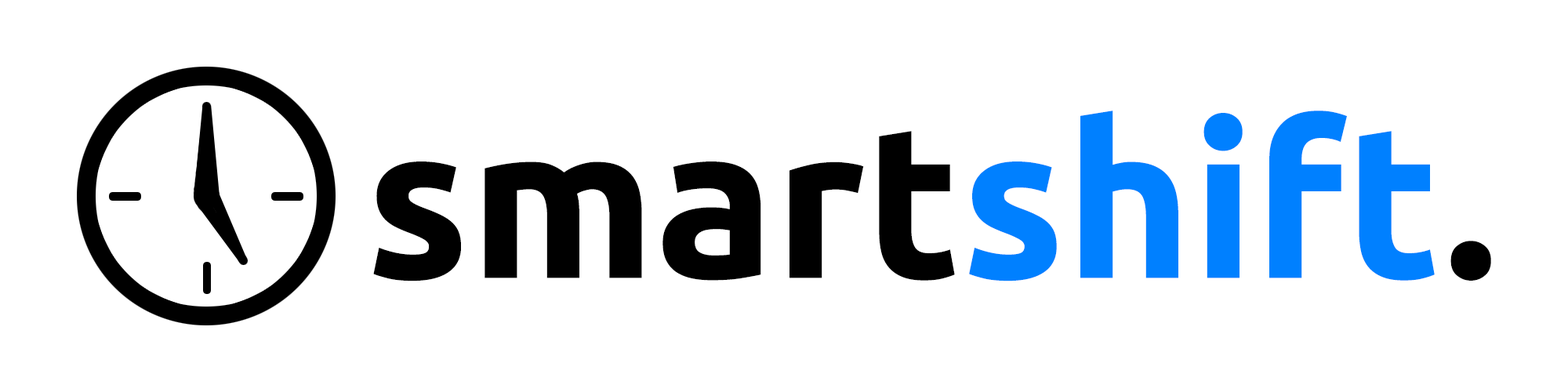
<style>
.page{position:relative;width:1568px;height:392px;background:#ffffff}
.page>*{position:absolute;margin:0}
.t1{font:215.2px "Ubuntu-Bold";color:#000000}
.t2{font:215.2px "Ubuntu-Bold";color:#0080ff}
</style>
<div class="page">
<p class="t1" style="left:373px;top:111px;width:1118px;height:170px">smart<span class="t2">shift</span>.</p>
</div>
